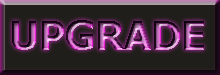
<style>
.page{position:relative;width:220px;height:75px;background:#201e1a}
.page>*{position:absolute;margin:0}
.t1{font:40px "Tahoma-Bold"}
</style>
<div class="page">
<p class="t1" style="left:12px;top:20px;width:192px;height:30px">UPGRADE</p>
</div>
